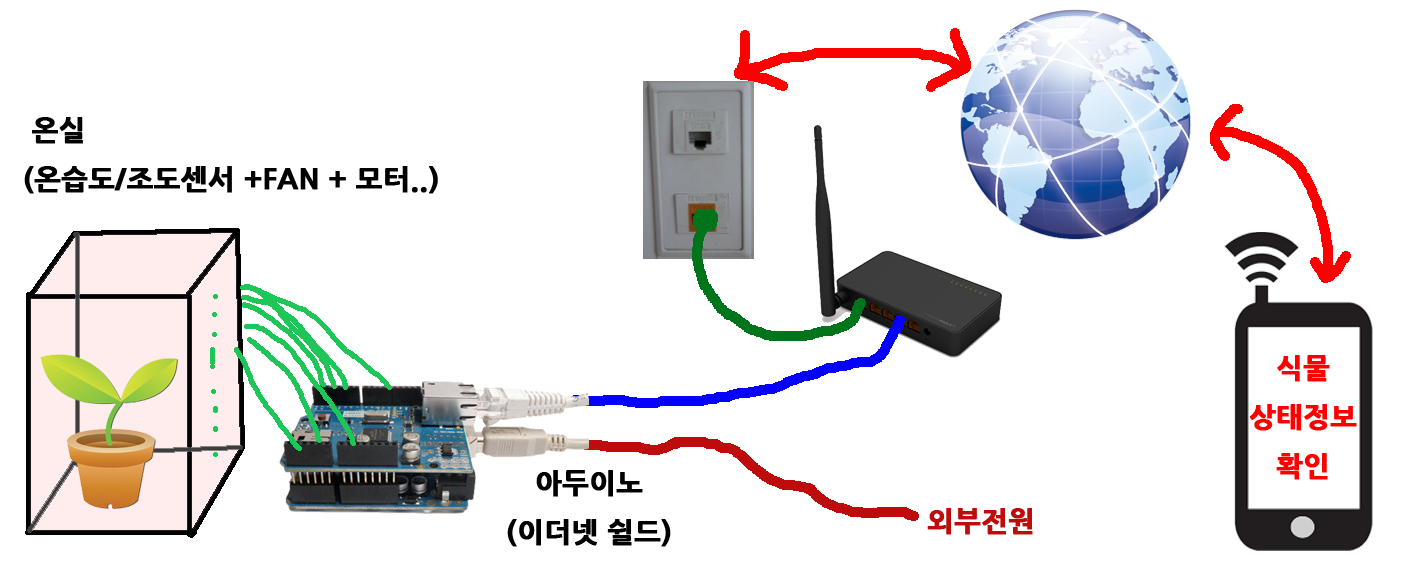
<style>
.page{position:relative;width:1417px;height:567px;background:#ffffff}
.page>*{position:absolute;margin:0}
.t1{font:28px "NanumGothicExtraBold";color:#000000;text-transform:uppercase;font-weight:bold}
.t2{font:28px "NanumGothicExtraBold";color:#ff0000;text-transform:uppercase;font-weight:bold}
.t3{font:28px "NanumGothicExtraBold";color:#be0c0c;text-transform:uppercase;font-weight:bold}
</style>
<div class="page">
<p class="t1" style="left:24px;top:117px;width:414px;height:77px">온실<br>(온습도/조도센서 +fan + 모터..)</p>
<p class="t2" style="left:1249px;top:355px;width:108px;height:125px;text-align:center">식물<br>상태정보<br>확인</p>
<p class="t1" style="left:507px;top:470px;width:164px;height:77px;text-align:center">아두이노<br>(이더넷 쉴드)</p>
<p class="t3" style="left:927px;top:508px;width:106px;height:27px">외부전원</p>
</div>
